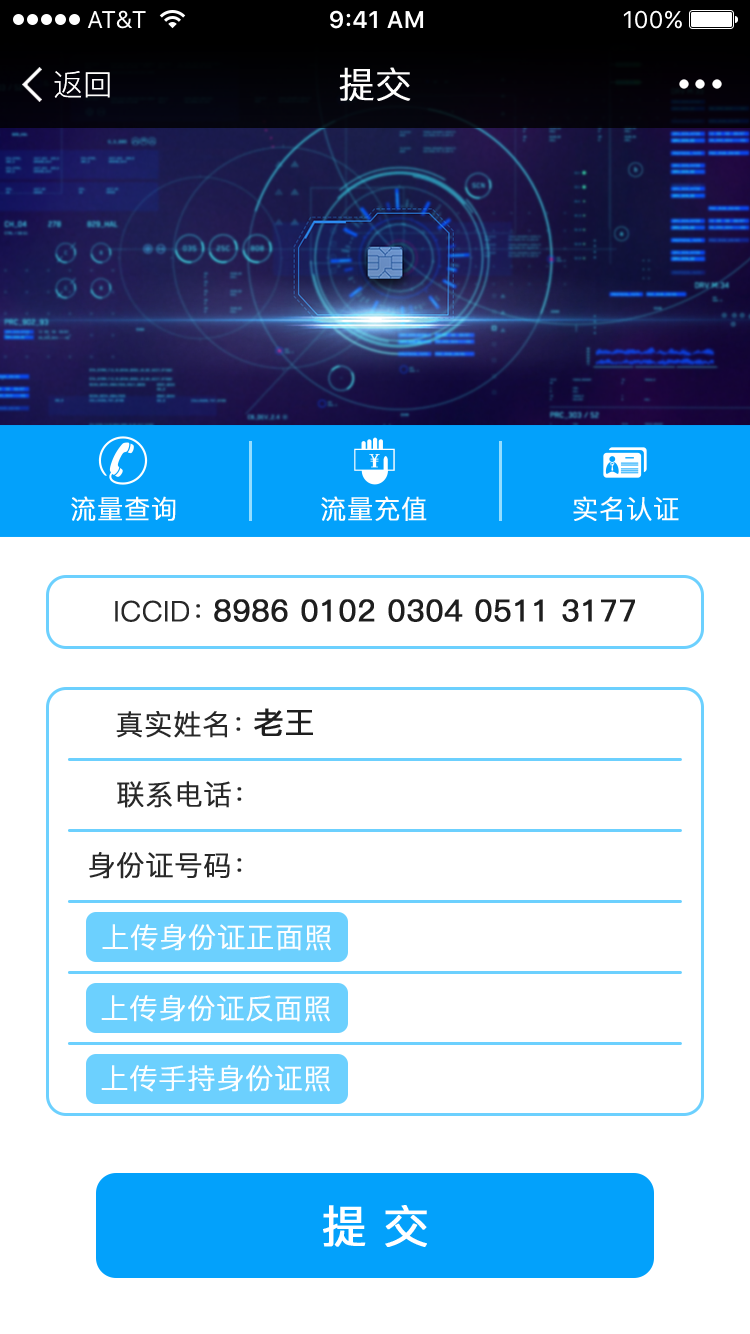
<style>
.page{position:relative;width:750px;height:1334px;background:#ffffff}
.page>*{position:absolute;margin:0}
.t1{font:30px "PingFang-SC-Regular";color:#fffefd}
.t2{font:36px "PingFang-SC-Regular";color:#fffefd;font-weight:bold}
.t3{font:26px "PingFang-SC-Regular";color:#fffefd;font-weight:bold}
.t4{font:28px "PingFang-SC-Regular";color:#282828;font-weight:bold}
.t5{font:30px "PingFang-SC-Medium";color:#1e1e1e;font-weight:bold}
.t6{font:28px "PingFang-SC-Regular";color:#fcfeff;font-weight:bold}
.t7{font:45px "PingFang-SC-Medium";color:#ffffff;font-weight:bold}
</style>
<div class="page">
<p class="t1" style="left:54px;top:71px;width:56px;height:27px">返回</p>
<p class="t2" style="left:339px;top:67px;width:72px;height:34px">提交</p>
<p class="t3" style="left:71px;top:496px;width:105px;height:25px">流量查询</p>
<p class="t3" style="left:321px;top:496px;width:106px;height:25px">流量充值</p>
<p class="t3" style="left:573px;top:496px;width:106px;height:25px">实名认证</p>
<p class="t4" style="left:115px;top:600px;width:85px;height:22px">ICCID：</p>
<p class="t5" style="left:214px;top:599px;width:421px;height:23px">8986 0102 0304 0511 3177</p>
<p class="t4" style="left:116px;top:711px;width:125px;height:27px">真实姓名：</p>
<p class="t5" style="left:254px;top:708px;width:59px;height:28px">老王</p>
<p class="t4" style="left:117px;top:781px;width:125px;height:27px">联系电话：</p>
<p class="t4" style="left:89px;top:852px;width:153px;height:27px">身份证号码：</p>
<p class="t6" style="left:102px;top:924px;width:229px;height:27px">上传身份证正面照</p>
<p class="t6" style="left:101px;top:995px;width:229px;height:27px">上传身份证反面照</p>
<p class="t6" style="left:101px;top:1065px;width:229px;height:27px">上传手持身份证照</p>
<p class="t7" style="left:323px;top:1205px;width:104px;height:42px">提 交</p>
</div>
